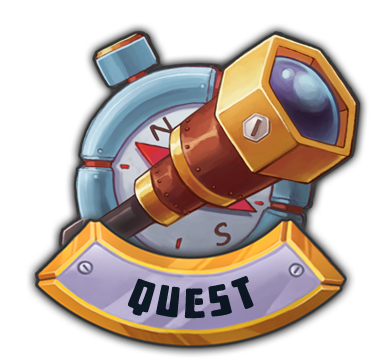
<style>
.page{position:relative;width:382px;height:363px;background:#ffffff}
.page>*{position:absolute;margin:0}
.t1{font:41px "MerceariaAntique";letter-spacing:0.1em;color:#000d17}
</style>
<div class="page">
<p class="t1" style="left:128px;top:276px;width:126px;height:43px;rotate:-2deg;opacity:0.93">QUEST</p>
</div>
